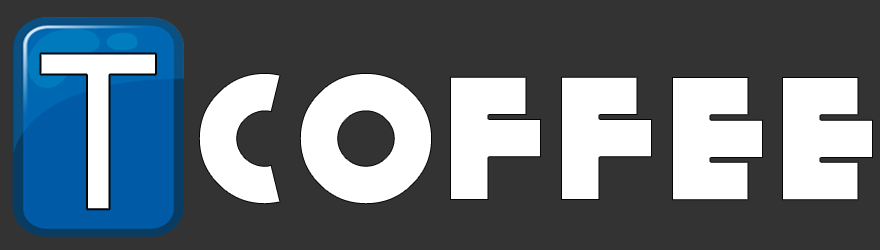
<style>
.page{position:relative;width:880px;height:250px;background:#333333}
.page>*{position:absolute;margin:0}
.t1{font:220px "Code-Bold";color:#ffffff}
.t2{font:180px "KiloGram";letter-spacing:0.08em;color:#ffffff}
</style>
<div class="page">
<p class="t1" style="left:40px;top:53px;width:116px;height:157px">t</p>
<p class="t2" style="left:198px;top:73px;width:675px;height:132px">cOffee</p>
</div>
